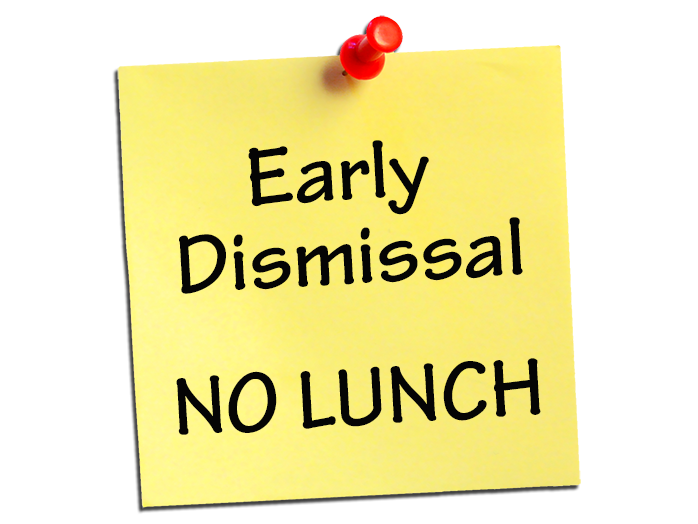
<style>
.page{position:relative;width:698px;height:524px;background:#ffffff}
.page>*{position:absolute;margin:0}
.t1{font:87.5px/84.5px "TektonPro-Bold";color:#050505}
.t2{font:87.5px/140.9px "TektonPro-Bold";color:#050505}
</style>
<div class="page">
<p class="t1" style="left:176px;top:140px;width:365px;height:295px;text-align:center;rotate:-3deg">Early <br>Dismissal<br><span class="t2">NO LUNCH</span></p>
</div>
